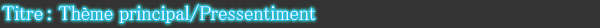
<style>
.page{position:relative;width:600px;height:28px;background:#333333}
.page>*{position:absolute;margin:0}
.t1{font:20px "MS-PMincho";color:#ffffff}
</style>
<div class="page">
<p class="t1" style="left:2px;top:4px;width:314px;height:19px">Titre : Thème principal/Pressentiment</p>
</div>
